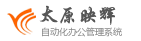
<style>
.page{position:relative;width:141px;height:41px;background:#ffffff}
.page>*{position:absolute;margin:0}
.t1{font:20px "STXingkai";color:#565656}
.t2{font:9px "MicrosoftYaHei";color:#878787}
</style>
<div class="page">
<p class="t1" style="left:39px;top:5px;width:77px;height:20px">太原映辉</p>
<p class="t2" style="left:42px;top:27px;width:80px;height:10px">自动化办公管理系统</p>
</div>
